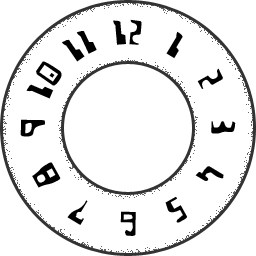
<style>
.page{position:relative;width:256px;height:256px;background:#ffffff}
.page>*{position:absolute;margin:0}
.t1{font:49.6px "HomemadeRobot";color:#000000;text-transform:uppercase}
</style>
<div class="page">
<p class="t1" style="left:113px;top:19px;width:29px;height:26px">12</p>
<p class="t1" style="left:62px;top:31px;width:35px;height:31px">11</p>
<p class="t1" style="left:166px;top:31px;width:17px;height:28px">1</p>
<p class="t1" style="left:26px;top:61px;width:36px;height:38px">10</p>
<p class="t1" style="left:197px;top:68px;width:26px;height:21px">2</p>
<p class="t1" style="left:20px;top:119px;width:25px;height:18px">9</p>
<p class="t1" style="left:211px;top:121px;width:25px;height:13px">3</p>
<p class="t1" style="left:32px;top:162px;width:29px;height:26px">8</p>
<p class="t1" style="left:195px;top:166px;width:29px;height:15px">4</p>
<p class="t1" style="left:165px;top:196px;width:22px;height:27px">5</p>
<p class="t1" style="left:67px;top:200px;width:21px;height:25px">7</p>
<p class="t1" style="left:120px;top:211px;width:16px;height:25px">6</p>
</div>
